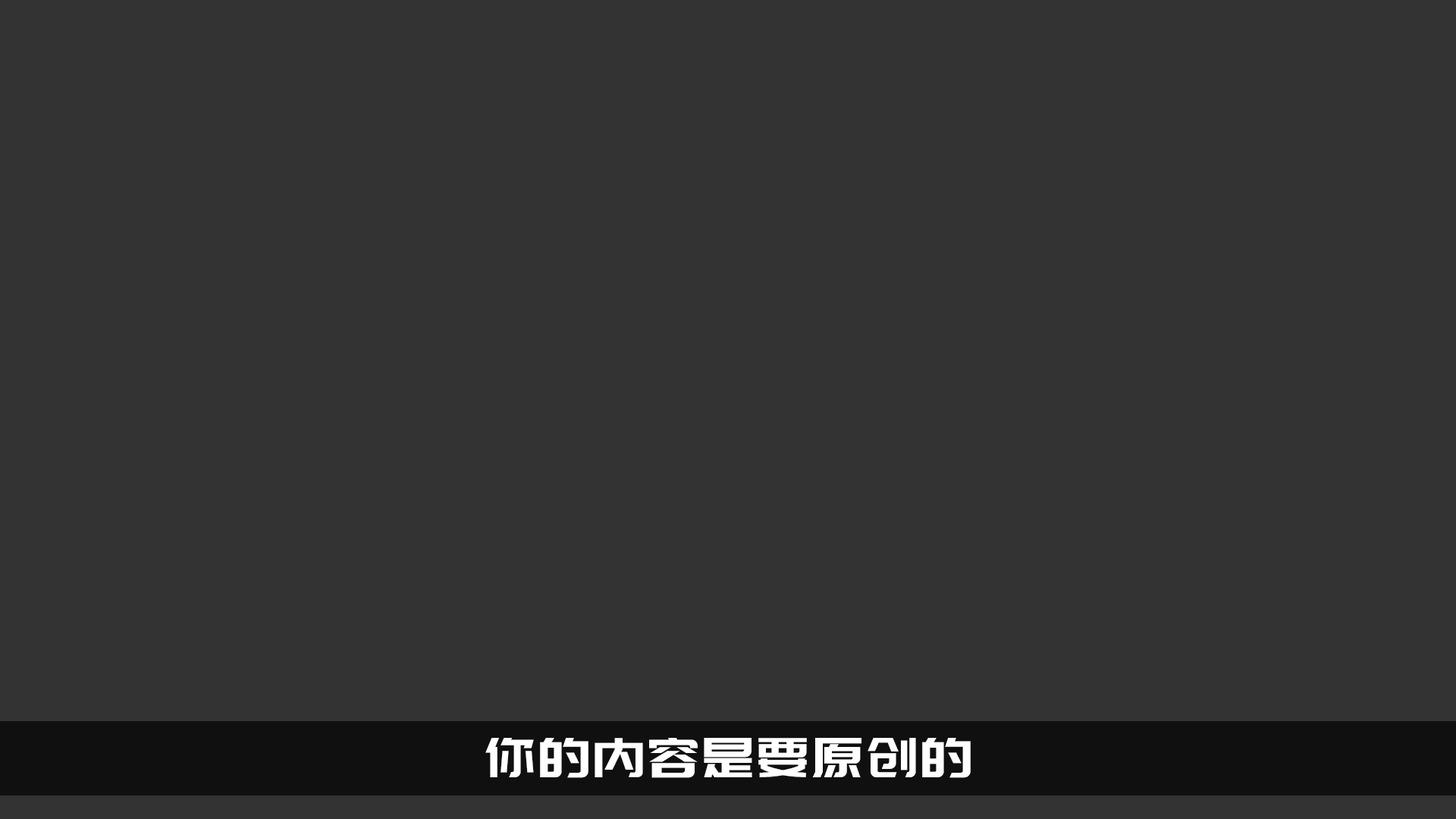
<style>
.page{position:relative;width:1456px;height:819px;background:#333333}
.page>*{position:absolute;margin:0}
.t1{font:54.6px "PangMenZhengDao-3";color:#ffffff}
</style>
<div class="page">
<p class="t1" style="left:485px;top:738px;width:486px;height:40px">你的内容是要原创的</p>
</div>
